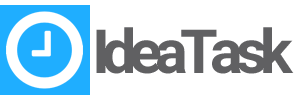
<style>
.page{position:relative;width:300px;height:100px;background:#ffffff}
.page>*{position:absolute;margin:0}
.t1{font:61px "Roboto-Bold";letter-spacing:-0.12em;color:#606062}
</style>
<div class="page">
<p class="t1" style="left:96px;top:27px;width:198px;height:47px">IdeaTask</p>
</div>
